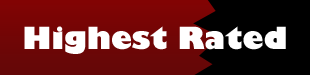
<style>
.page{position:relative;width:310px;height:75px;background:#000000}
.page>*{position:absolute;margin:0}
.t1{font:30px "GillSans-UltraBold";color:#ffffff}
</style>
<div class="page">
<p class="t1" style="left:24px;top:26px;width:262px;height:28px">Highest Rated</p>
</div>
